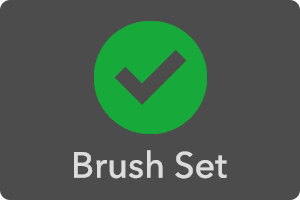
<style>
.page{position:relative;width:300px;height:200px;background:#4c4c4c}
.page>*{position:absolute;margin:0}
.t1{font:36px "AvenirNext-Medium";color:#dcdcdc}
</style>
<div class="page">
<p class="t1" style="left:74px;top:150px;width:153px;height:29px">Brush Set</p>
</div>
